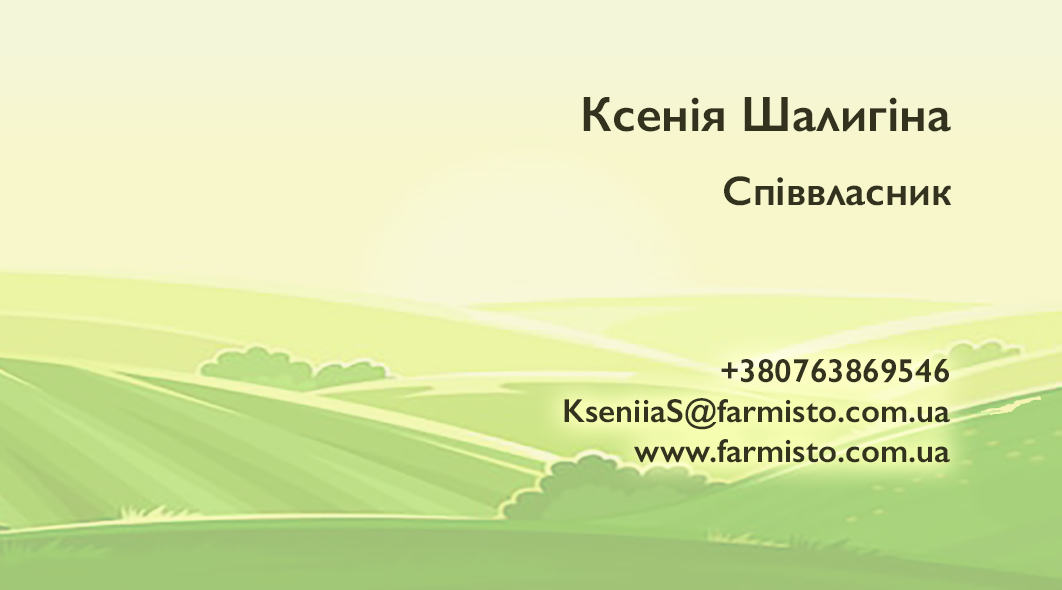
<style>
.page{position:relative;width:1062px;height:590px}
.page>*{position:absolute;margin:0}
.t1{font:50px "GillSans-SemiBold";color:#32321e}
.t2{font:41.6px "GillSans-SemiBold";color:#32321e}
.t3{font:33.3px "GillSans-SemiBold";color:#32321e}
</style>
<div class="page">
<p class="t1" style="left:583px;top:97px;width:368px;height:35px">Ксенія Шалигіна</p>
<p class="t2" style="left:724px;top:176px;width:228px;height:30px">Співвласник</p>
<p class="t3" style="left:564px;top:359px;width:386px;height:104px;text-align:right">+380763869546<br>KseniiaS@farmisto.com.ua<br>www.farmisto.com.ua</p>
</div>
